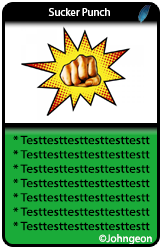
<style>
.page{position:relative;width:162px;height:249px;background:#1aab39}
.page>*{position:absolute;margin:0}
.t1{font:11px "MyriadPro-Regular";color:#ffffff}
.t2{font:11.9px "MyriadPro-Regular";color:#000000;scale:1.11 1}
</style>
<div class="page">
<p class="t1" style="left:48px;top:8px;width:62px;height:8px">Sucker Punch</p>
<p class="t2" style="left:13px;top:135px;width:137px;height:96px">* Testtesttesttesttesttestt<br>* Testtesttesttesttesttestt<br>* Testtesttesttesttesttestt<br>* Testtesttesttesttesttestt<br>* Testtesttesttesttesttestt<br>* Testtesttesttesttesttestt<br>* Testtesttesttesttesttestt</p>
<p class="t1" style="left:99px;top:234px;width:53px;height:11px">©Johngeon</p>
</div>
